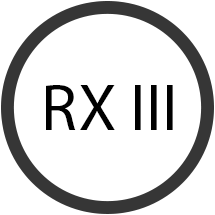
<style>
.page{position:relative;width:215px;height:215px;background:#ffffff}
.page>*{position:absolute;margin:0}
.t1{font:66.7px "MyriadPro-Regular";color:#000000}
</style>
<div class="page">
<p class="t1" style="left:46px;top:85px;width:127px;height:45px">RX III</p>
</div>
